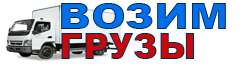
<style>
.page{position:relative;width:245px;height:66px;background:#ffffff}
.page>*{position:absolute;margin:0}
.t1{font:36px "Arial-Black";color:#006fe9;scale:1.16 1}
.t2{font:36px "Arial-Black";color:#ca0808}
</style>
<div class="page">
<p class="t1" style="left:61px;top:3px;width:165px;height:26px">ВОЗИМ</p>
<p class="t2" style="left:61px;top:33px;width:133px;height:26px">ГРУЗЫ</p>
</div>
